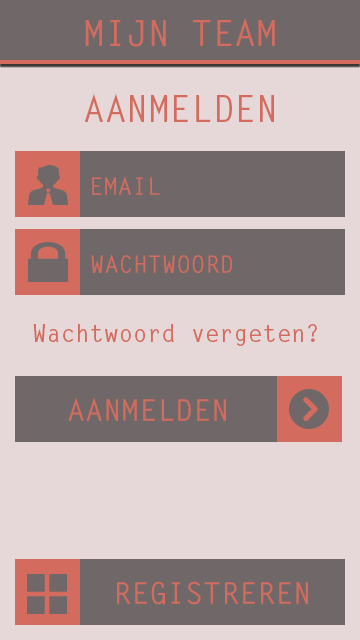
<style>
.page{position:relative;width:360px;height:640px;background:#e6d8d8}
.page>*{position:absolute;margin:0}
.t1{font:36px "LetterGothicStd-Bold";color:#d36c5e}
.t2{font:24px "LetterGothicStd-Bold";color:#d36c5e}
.t3{font:30px "LetterGothicStd-Bold";color:#d36c5e}
</style>
<div class="page">
<p class="t1" style="left:85px;top:17px;width:190px;height:30px">MIJN TEAM</p>
<p class="t1" style="left:84px;top:93px;width:190px;height:29px">AANMELDEN</p>
<p class="t2" style="left:92px;top:176px;width:68px;height:19px">EMAIL</p>
<p class="t2" style="left:91px;top:254px;width:141px;height:19px">WACHTWOORD</p>
<p class="t2" style="left:33px;top:324px;width:284px;height:22px">Wachtwoord vergeten?</p>
<p class="t3" style="left:68px;top:397px;width:158px;height:24px">AANMELDEN</p>
<p class="t3" style="left:117px;top:581px;width:191px;height:24px">REGISTREREN</p>
</div>
